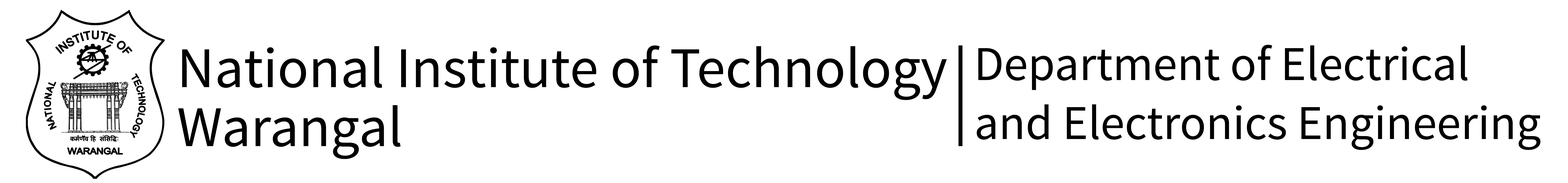
<style>
.page{position:relative;width:1568px;height:183px;background:#ffffff}
.page>*{position:absolute;margin:0}
.t1{font:57.6px/29.5px "SourceSansPro-Regular";color:#000000}
.t2{font:48.7px/29.6px "SourceSansPro-Regular";color:#000000}
</style>
<div class="page">
<p class="t1" style="left:178px;top:46px;width:769px;height:113px">National Institute of Technology <br><br>Warangal</p>
<p class="t2" style="left:977px;top:45px;width:563px;height:105px">Department of Electrical <br><br>and Electronics Engineering</p>
</div>
